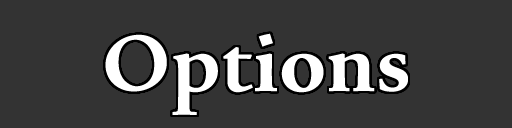
<style>
.page{position:relative;width:512px;height:128px;background:#333333}
.page>*{position:absolute;margin:0}
.t1{font:85px "Pescadero-Bold";color:#ffffff}
</style>
<div class="page">
<p class="t1" style="left:105px;top:33px;width:303px;height:82px">Options</p>
</div>
